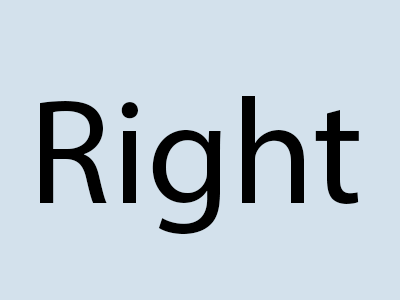
<style>
.page{position:relative;width:400px;height:300px;background:#d3e1ec}
.page>*{position:absolute;margin:0}
.t1{font:150px "MyriadHebrew-Regular";color:#000000}
</style>
<div class="page">
<p class="t1" style="left:40px;top:96px;width:319px;height:139px">Right</p>
</div>
